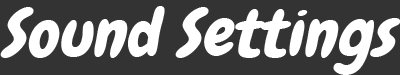
<style>
.page{position:relative;width:400px;height:75px;background:#333333}
.page>*{position:absolute;margin:0}
.t1{font:63.7px "Chewy";color:#ffffff;font-style:italic;scale:1.11 1}
</style>
<div class="page">
<p class="t1" style="left:0px;top:6px;width:401px;height:69px">Sound Settings</p>
</div>
